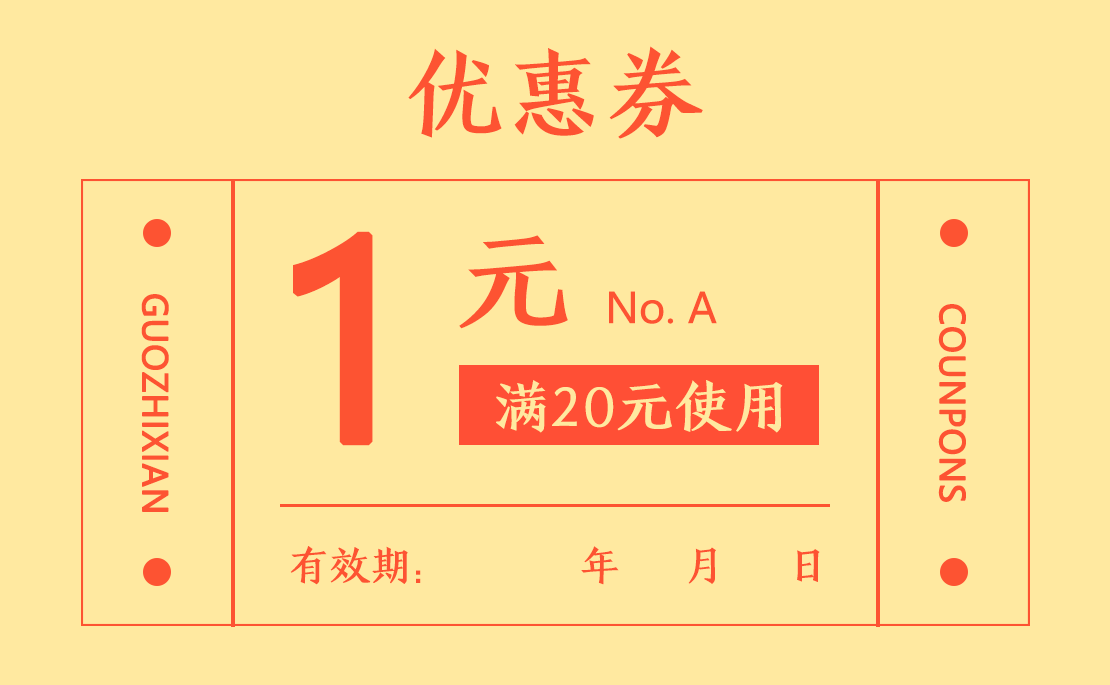
<style>
.page{position:relative;width:1110px;height:685px;background:#ffe9a0}
.page>*{position:absolute;margin:0}
.t1{font:100px "HYJinKaiJ";color:#fd5332}
.t2{font:266.7px "MicrosoftYaHei";color:#fd5332;font-weight:bold}
.t3{font:116.7px "HYJinKaiJ";color:#fd5332}
.t4{font:33.3px "MicrosoftYaHei";color:#fd5332;font-weight:bold}
.t5{font:41.7px "MicrosoftYaHei";color:#fd5332}
.t6{font:58.3px "HYJinKaiJ";color:#ffe9a0}
.t7{font:41.7px "HYJinKaiJ";color:#fd5332}
</style>
<div class="page">
<p class="t1" style="left:408px;top:46px;width:295px;height:93px">优惠券</p>
<p class="t2" style="left:293px;top:231px;width:80px;height:215px">1</p>
<p class="t3" style="left:459px;top:235px;width:109px;height:94px">元</p>
<p class="t4" style="left:141px;top:294px;width:28px;height:218px;rotate:90deg">GUOZHIXIAN</p>
<p class="t5" style="left:609px;top:291px;width:108px;height:33px">No. A</p>
<p class="t4" style="left:938px;top:304px;width:28px;height:198px;rotate:90deg">COUNPONS</p>
<p class="t6" style="left:496px;top:380px;width:287px;height:53px">满20元使用</p>
<p class="t7" style="left:290px;top:546px;width:530px;height:39px">有效期：      年   月   日</p>
</div>
